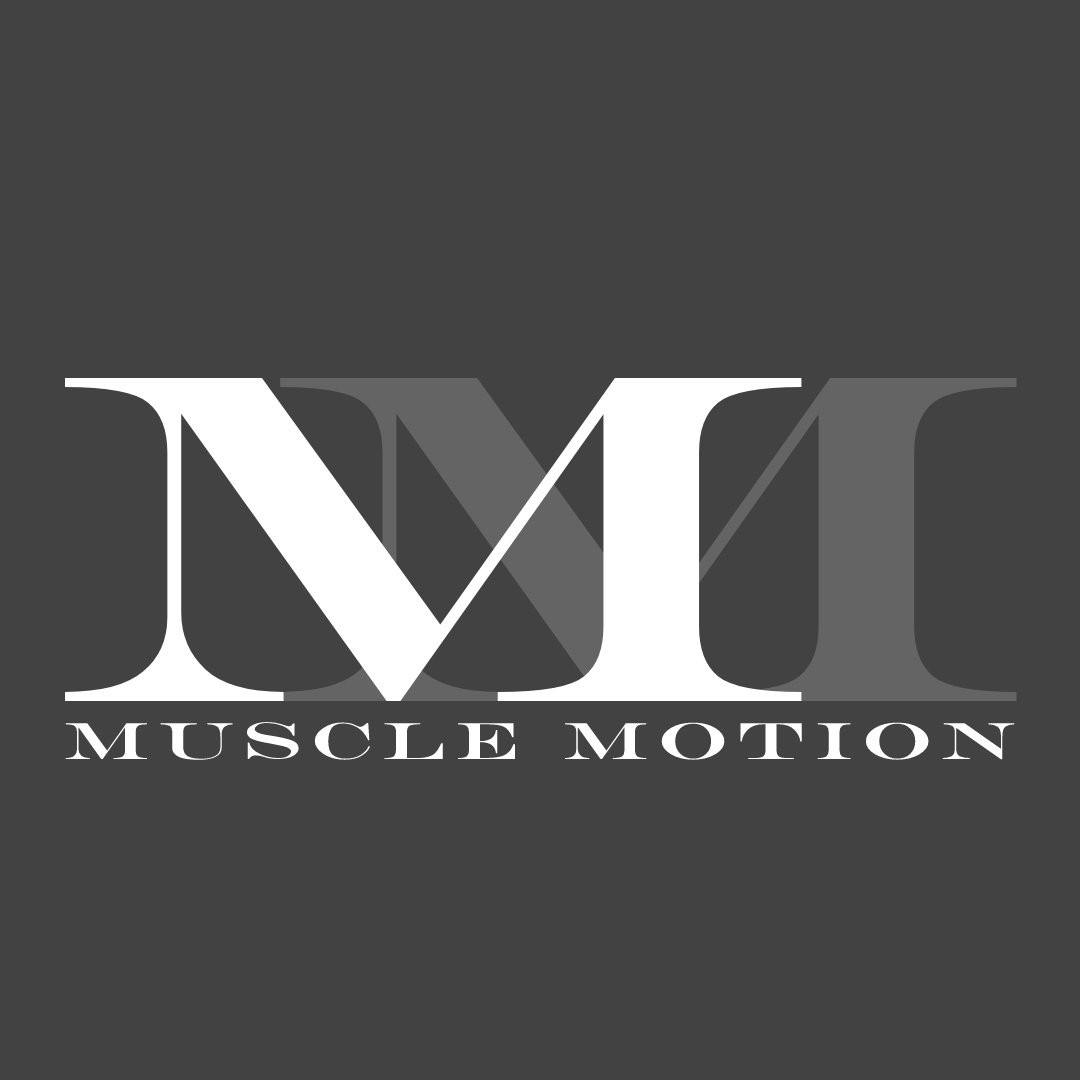
<style>
.page{position:relative;width:1080px;height:1080px;background:#424242}
.page>*{position:absolute;margin:0}
.t1{font:473.8px "Engry";letter-spacing:-1.2em;color:#ffffff;scale:1.46 1}
.t2{font:52.3px "Engry";letter-spacing:0.15em;color:#ffffff;scale:1.46 1}
</style>
<div class="page">
<p class="t1" style="left:65px;top:378px;width:737px;height:323px">M</p>
<p class="t2" style="left:65px;top:722px;width:950px;height:38px">Muscle Motion</p>
</div>
